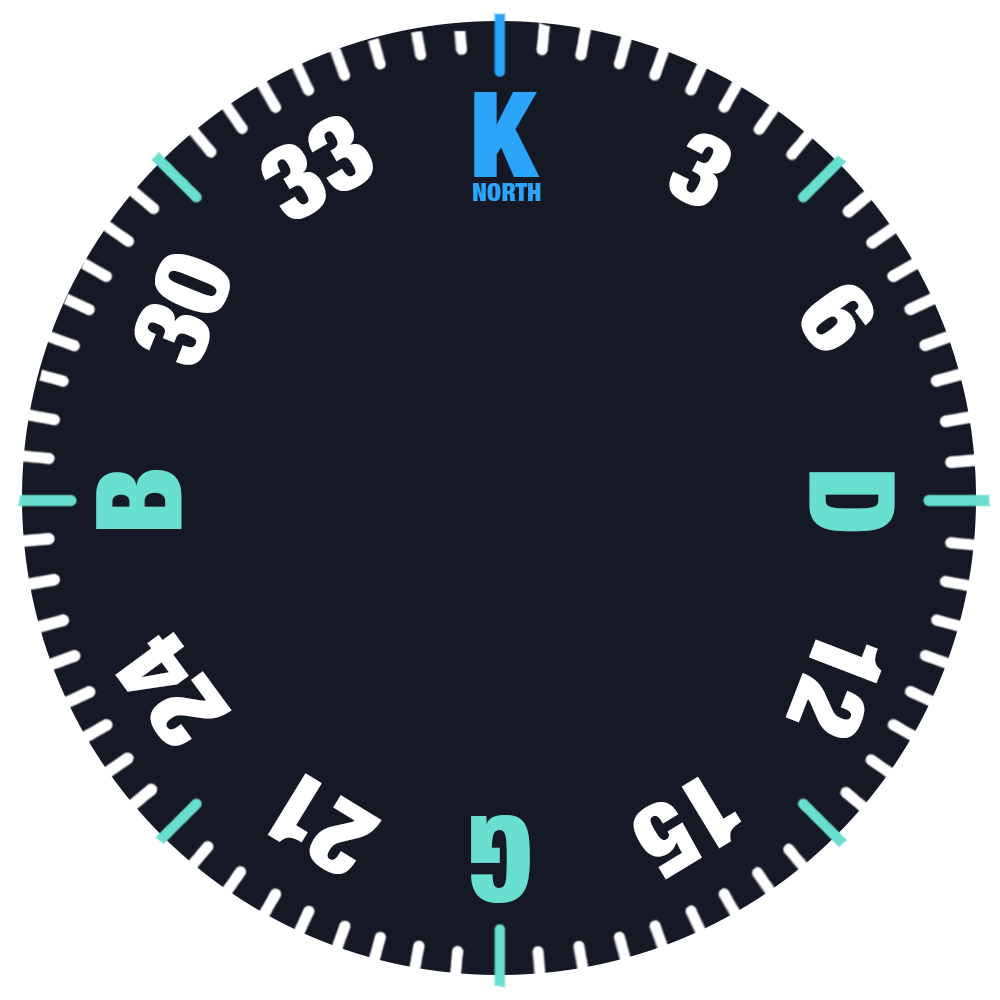
<style>
.page{position:relative;width:1000px;height:1000px;background:#151825}
.page>*{position:absolute;margin:0}
.t1{font:118.9px "HelveticaNeue-CondensedBlack";color:#2aa5f9}
.t2{font:104.1px "HelveticaNeue-CondensedBlack";color:#ffffff}
.t3{font:101.3px "HelveticaNeue-CondensedBlack";color:#ffffff}
.t4{font:25.4px "HelveticaNeue-CondensedBlack";color:#2aa5f9}
.t5{font:102px "HelveticaNeue-CondensedBlack";color:#ffffff}
.t6{font:118.9px "HelveticaNeue-CondensedBlack";color:#68dfcf}
</style>
<div class="page">
<p class="t1" style="left:474px;top:92px;width:66px;height:85px">K</p>
<p class="t2" style="left:261px;top:116px;width:112px;height:103px;rotate:-30deg">33</p>
<p class="t3" style="left:669px;top:133px;width:62px;height:73px;rotate:26deg">3</p>
<p class="t4" style="left:473px;top:183px;width:68px;height:18px">NORTH</p>
<p class="t2" style="left:134px;top:254px;width:96px;height:111px;rotate:-68deg">30</p>
<p class="t5" style="left:801px;top:284px;width:73px;height:67px;rotate:54deg">6</p>
<p class="t6" style="left:96px;top:470px;width:86px;height:59px;rotate:-90deg">B</p>
<p class="t6" style="left:809px;top:472px;width:86px;height:60px;rotate:90deg">D</p>
<p class="t2" style="left:115px;top:632px;width:117px;height:114px;rotate:-126deg">24</p>
<p class="t5" style="left:785px;top:639px;width:97px;height:99px;rotate:111deg">12</p>
<p class="t5" style="left:267px;top:773px;width:115px;height:101px;rotate:-149deg">21</p>
<p class="t5" style="left:633px;top:776px;width:109px;height:104px;rotate:149deg">15</p>
<p class="t6" style="left:471px;top:815px;width:59px;height:88px;rotate:-180deg">G</p>
</div>
